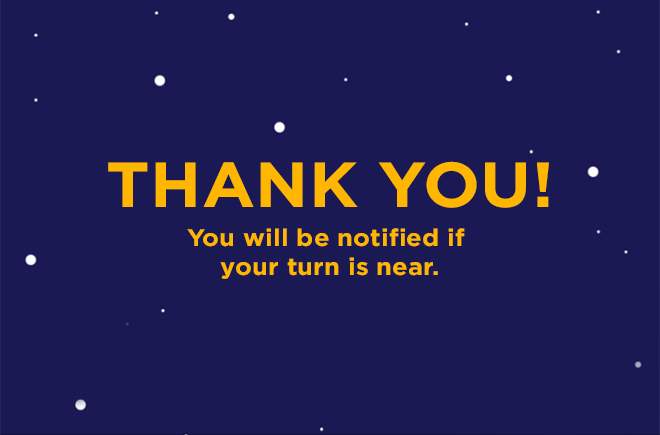
<style>
.page{position:relative;width:660px;height:435px;background:#1a1953}
.page>*{position:absolute;margin:0}
.t1{font:63.4px "Gotham-Bold";letter-spacing:0.005em;color:#feb600;scale:1.06 1}
.t2{font:24px "Gotham-Bold";letter-spacing:0.005em;color:#feb600;scale:1.06 1}
</style>
<div class="page">
<p class="t1" style="left:108px;top:161px;width:441px;height:47px">THANK YOU!</p>
<p class="t2" style="left:187px;top:228px;width:278px;height:51px;text-align:center">You will be notified if <br>your turn is near.</p>
</div>
